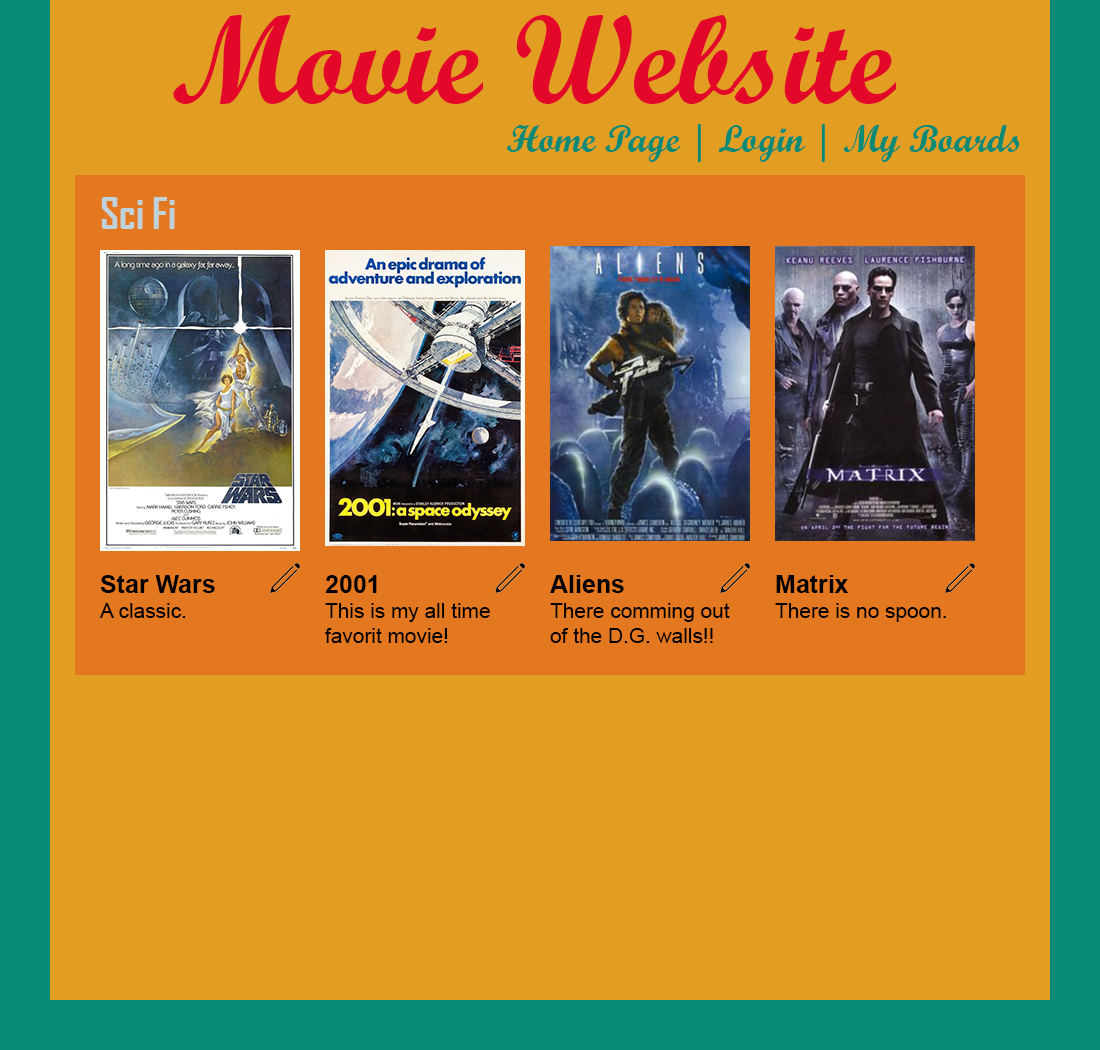
<style>
.page{position:relative;width:1100px;height:1050px;background:#e29e23}
.page>*{position:absolute;margin:0}
.t1{font:125px "ScriptMTBold";color:#e3072a}
.t2{font:37.5px "ScriptMTBold";color:#098a74}
.t3{font:41.7px "AgencyFB-Bold";color:#bfd2d9}
.t4{font:20.8px "ArialMT";color:#000000}
.t5{font:25px "Arial-BoldMT";color:#000000}
</style>
<div class="page">
<p class="t1" style="left:173px;top:15px;width:723px;height:89px">Movie Website</p>
<p class="t2" style="left:506px;top:124px;width:514px;height:38px">Home Page | Login | My Boards</p>
<p class="t3" style="left:101px;top:197px;width:74px;height:32px">Sci Fi</p>
<p class="t4" style="left:100px;top:575px;width:115px;height:43px"><span class="t5">Star Wars<br></span>A classic.</p>
<p class="t4" style="left:325px;top:575px;width:165px;height:68px"><span class="t5">2001<br></span>This is my all time favorit movie!</p>
<p class="t4" style="left:550px;top:575px;width:180px;height:68px"><span class="t5">Aliens<br></span>There comming out of the D.G. walls!!</p>
<p class="t4" style="left:775px;top:575px;width:171px;height:47px"><span class="t5">Matrix<br></span>There is no spoon.</p>
</div>
